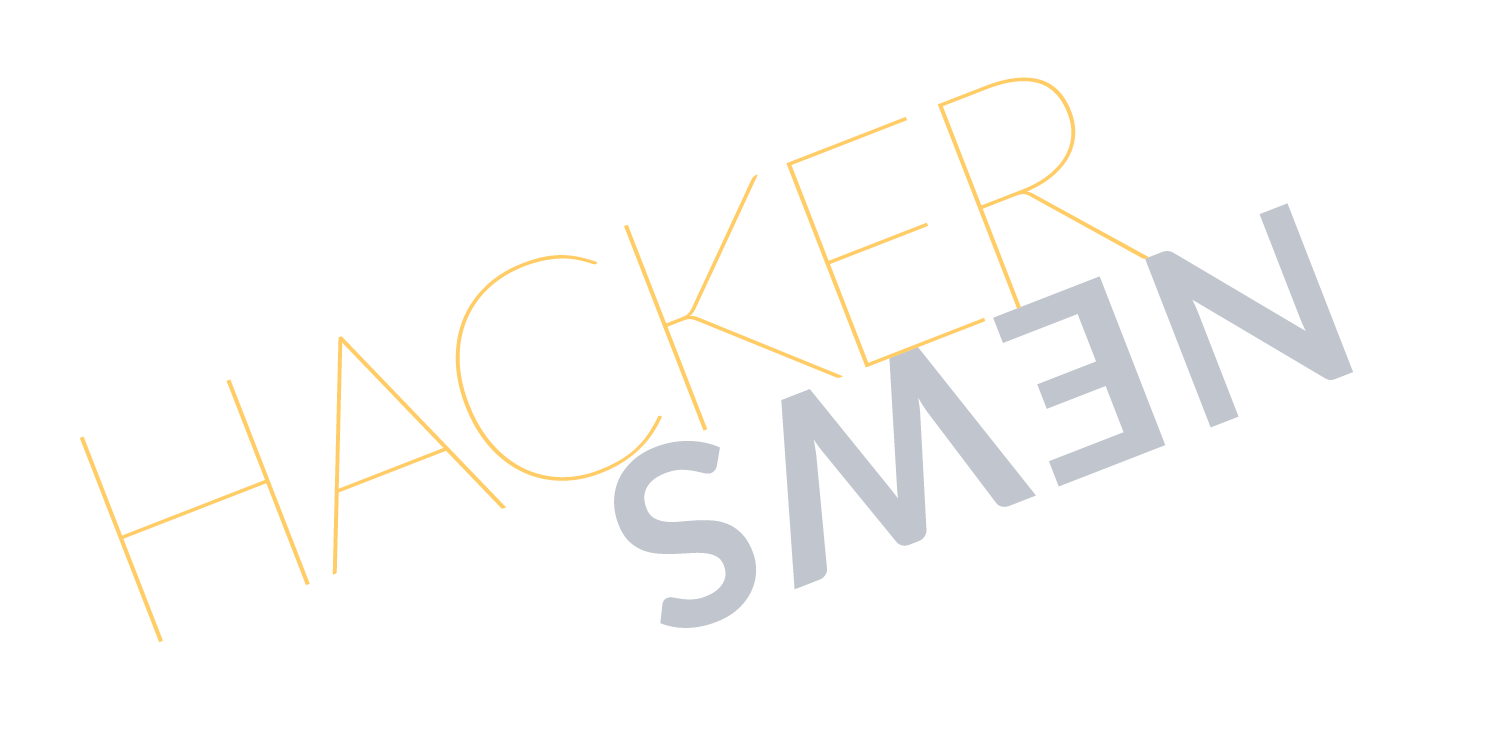
<style>
.page{position:relative;width:1500px;height:750px;background:#ffffff}
.page>*{position:absolute;margin:0}
.t1{font:312.5px "Lato-Hairline";letter-spacing:-0.1em;color:#ffcc66}
.t2{font:312.5px "Lato-Hairline";letter-spacing:-0.05em;color:#ffcc66}
.t3{font:312.5px "Lato-Hairline";letter-spacing:-0.08em;color:#ffcc66}
.t4{font:312.5px "Lato-Hairline";letter-spacing:-0.065em;color:#ffcc66}
.t5{font:250px "Lato-Bold";letter-spacing:0.05em;color:#c0c5ce}
</style>
<div class="page">
<p class="t1" style="left:79px;top:77px;width:1070px;height:566px;text-align:center"><span class="t2">H</span><span class="t3">A</span>C<span class="t4">K</span>ER</p>
<p class="t5" style="left:614px;top:203px;width:739px;height:425px">NEWS</p>
</div>
